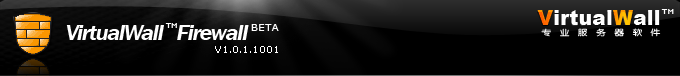
<style>
.page{position:relative;width:680px;height:76px;background:#000000}
.page>*{position:absolute;margin:0}
.t1{font:19.7px "Arial-Black";letter-spacing:0.025em;color:#ffffff}
.t2{font:19.7px "Arial-Black";letter-spacing:0.025em;color:#ff9900}
.t3{font:6px "04b08";letter-spacing:0.025em;color:#ffffff}
.t4{font:22px "FranklinGothicITCbyBT-DemiItal";letter-spacing:-0.05em;color:#ffffff}
.t5{font:6px "04b08";letter-spacing:-0.05em;color:#ffffff}
.t6{font:10px "Verdana";letter-spacing:0.05em;color:#ffffff}
.t7{font:7.9px "YouYuan";letter-spacing:0.85em;color:#ffffff;scale:1.25 1}
.t8{font:9px "Verdana";color:#ffffff}
</style>
<div class="page">
<p class="t1" style="left:537px;top:10px;width:123px;height:15px"><span class="t2">V</span>irtual<span class="t2">W</span>all</p>
<p class="t3" style="left:661px;top:9px;width:13px;height:5px">TM</p>
<p class="t4" style="left:66px;top:25px;width:98px;height:15px">VirtualWall</p>
<p class="t5" style="left:165px;top:23px;width:12px;height:5px">TM</p>
<p class="t4" style="left:177px;top:25px;width:72px;height:15px">Firewall</p>
<p class="t6" style="left:251px;top:24px;width:28px;height:7px">BETA</p>
<p class="t7" style="left:541px;top:28px;width:120px;height:9px">专业服务器软件</p>
<p class="t8" style="left:215px;top:46px;width:63px;height:7px">V1.0.1.1001</p>
</div>
